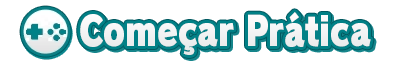
<style>
.page{position:relative;width:400px;height:64px;background:#ffffff}
.page>*{position:absolute;margin:0}
.t1{font:40px "RodinPro-UB";letter-spacing:-0.015em;color:#f2f3f3;scale:0.84 1}
</style>
<div class="page">
<p class="t1" style="left:80px;top:12px;width:291px;height:43px">Começar Prática</p>
</div>
